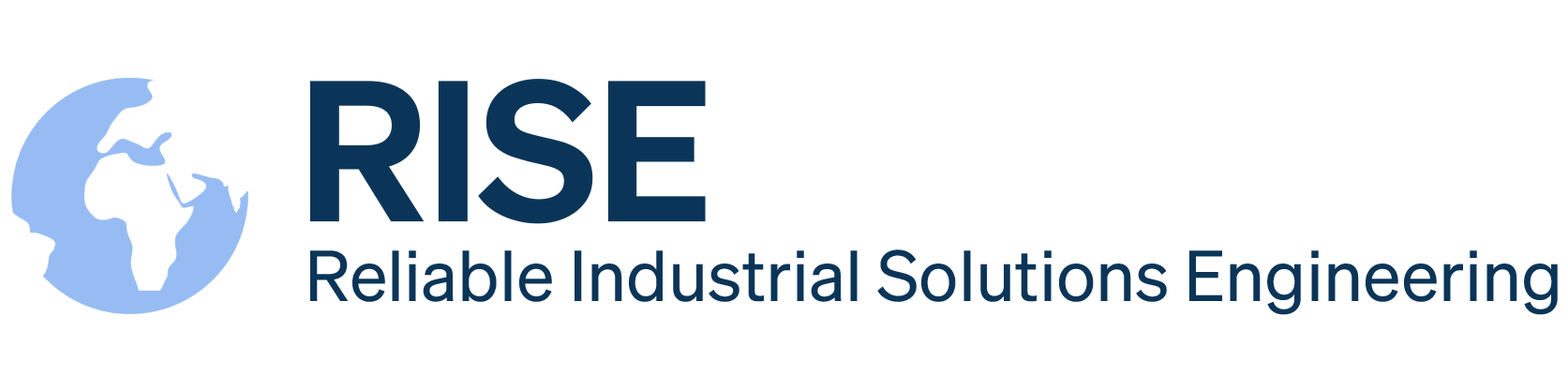
<style>
.page{position:relative;width:1568px;height:392px;background:#ffffff}
.page>*{position:absolute;margin:0}
.t1{font:195.3px "ShneVF-Halbfett";color:#0b3558}
.t2{font:70.3px "SohneVF-Buch";color:#0b3558}
</style>
<div class="page">
<p class="t1" style="left:309px;top:79px;width:397px;height:145px">RISE</p>
<p class="t2" style="left:310px;top:249px;width:1248px;height:66px">Reliable Industrial Solutions Engineering</p>
</div>
